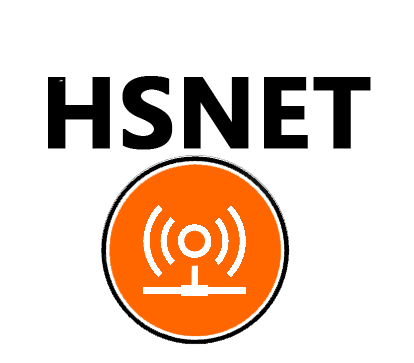
<style>
.page{position:relative;width:414px;height:363px;background:#ffffff}
.page>*{position:absolute;margin:0}
.t1{font:92px "MicrosoftYaHeiUI-Bold";color:#000000;font-weight:bold}
</style>
<div class="page">
<p class="t1" style="left:48px;top:76px;width:323px;height:74px">HSNET</p>
</div>
